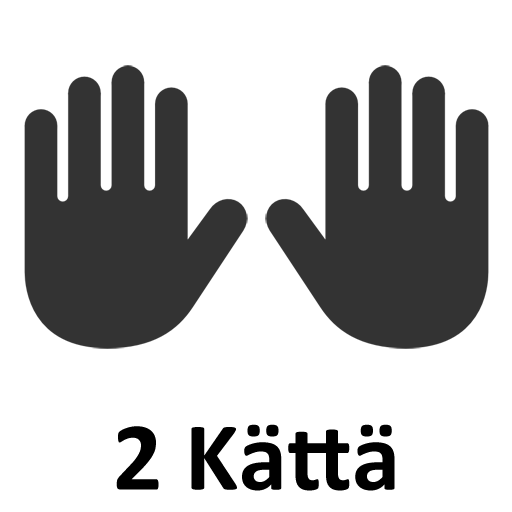
<style>
.page{position:relative;width:512px;height:512px;background:#ffffff}
.page>*{position:absolute;margin:0}
.t1{font:98.5px "Calibri-Bold";color:#000000}
.t2{font:1772.3px "Calibri-Bold";color:#000000}
</style>
<div class="page">
<p class="t1" style="left:116px;top:424px;width:279px;height:67px">2 Kättä <span class="t2">kättä</span></p>
</div>
